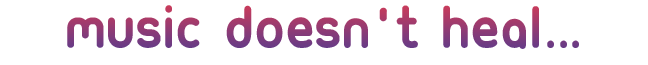
<style>
.page{position:relative;width:648px;height:65px;background:#ffffff}
.page>*{position:absolute;margin:0}
.t1{font:64px "Ubuntu-Title"}
</style>
<div class="page">
<p class="t1" style="left:67px;top:5px;width:512px;height:44px">music doesn't heal ...</p>
</div>
